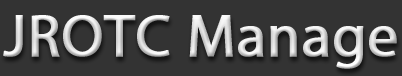
<style>
.page{position:relative;width:402px;height:76px;background:#333333}
.page>*{position:absolute;margin:0}
.t1{font:60px "MyriadPro-Regular";font-weight:bold}
</style>
<div class="page">
<p class="t1" style="left:3px;top:15px;width:394px;height:54px">JROTC Manage</p>
</div>
